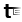
<style>
.page{position:relative;width:22px;height:22px;background:#ffffff}
.page>*{position:absolute;margin:0}
.t1{font:20.8px "HelveticaNeue-Bold";color:#000000}
</style>
<div class="page">
<p class="t1" style="left:3px;top:4px;width:8px;height:14px">t</p>
</div>
